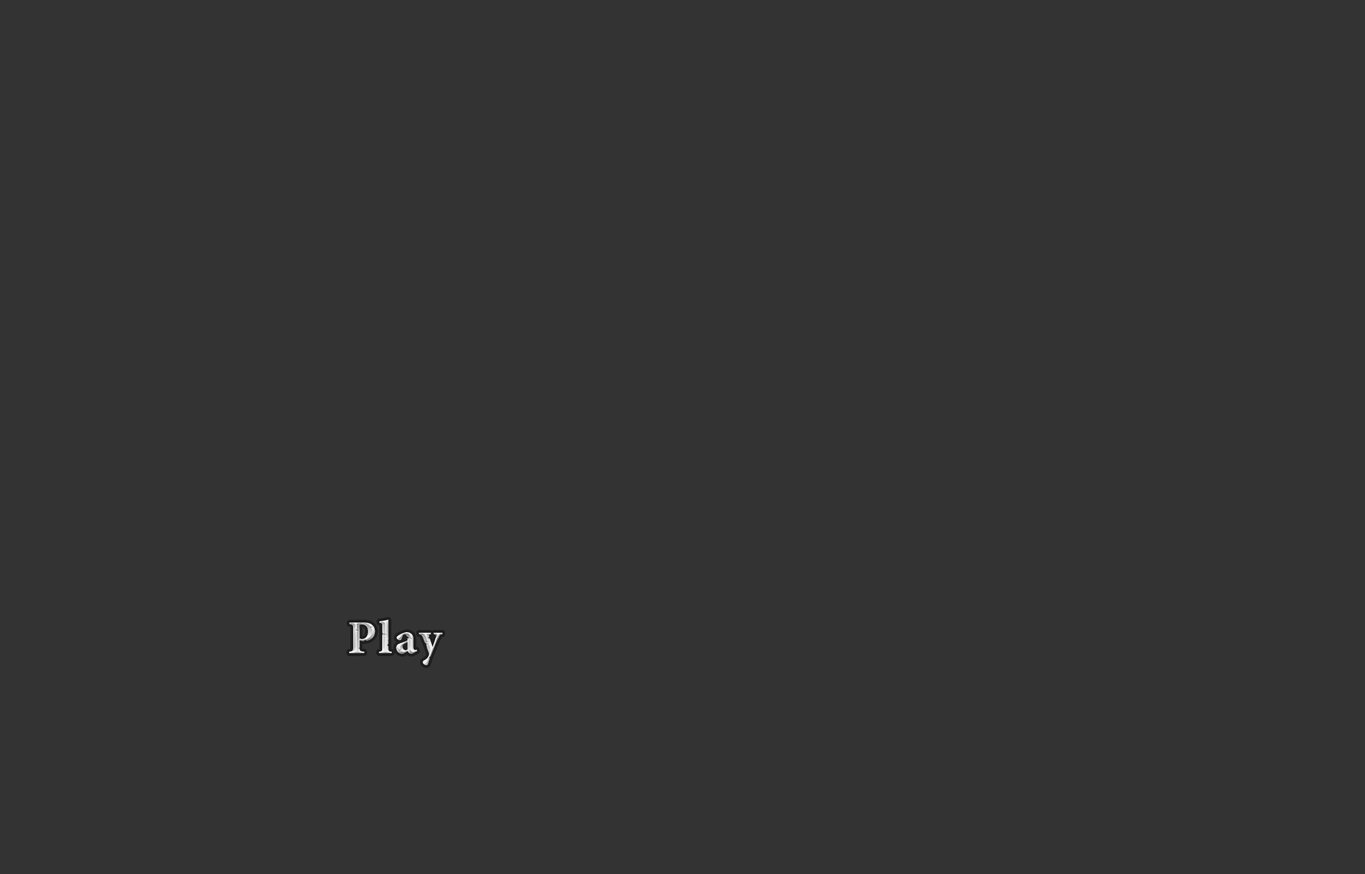
<style>
.page{position:relative;width:1365px;height:874px;background:#333333}
.page>*{position:absolute;margin:0}
.t1{font:47.4px "MinionPro-Bold";letter-spacing:0.05em}
</style>
<div class="page">
<p class="t1" style="left:349px;top:619px;width:93px;height:46px">Play</p>
</div>
